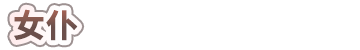
<style>
.page{position:relative;width:360px;height:50px;background:#ffffff}
.page>*{position:absolute;margin:0}
.t1{font:32px "SourceHanSansSC-Bold";color:#72534d;font-weight:bold}
</style>
<div class="page">
<p class="t1" style="left:14px;top:9px;width:64px;height:32px">女仆</p>
</div>
